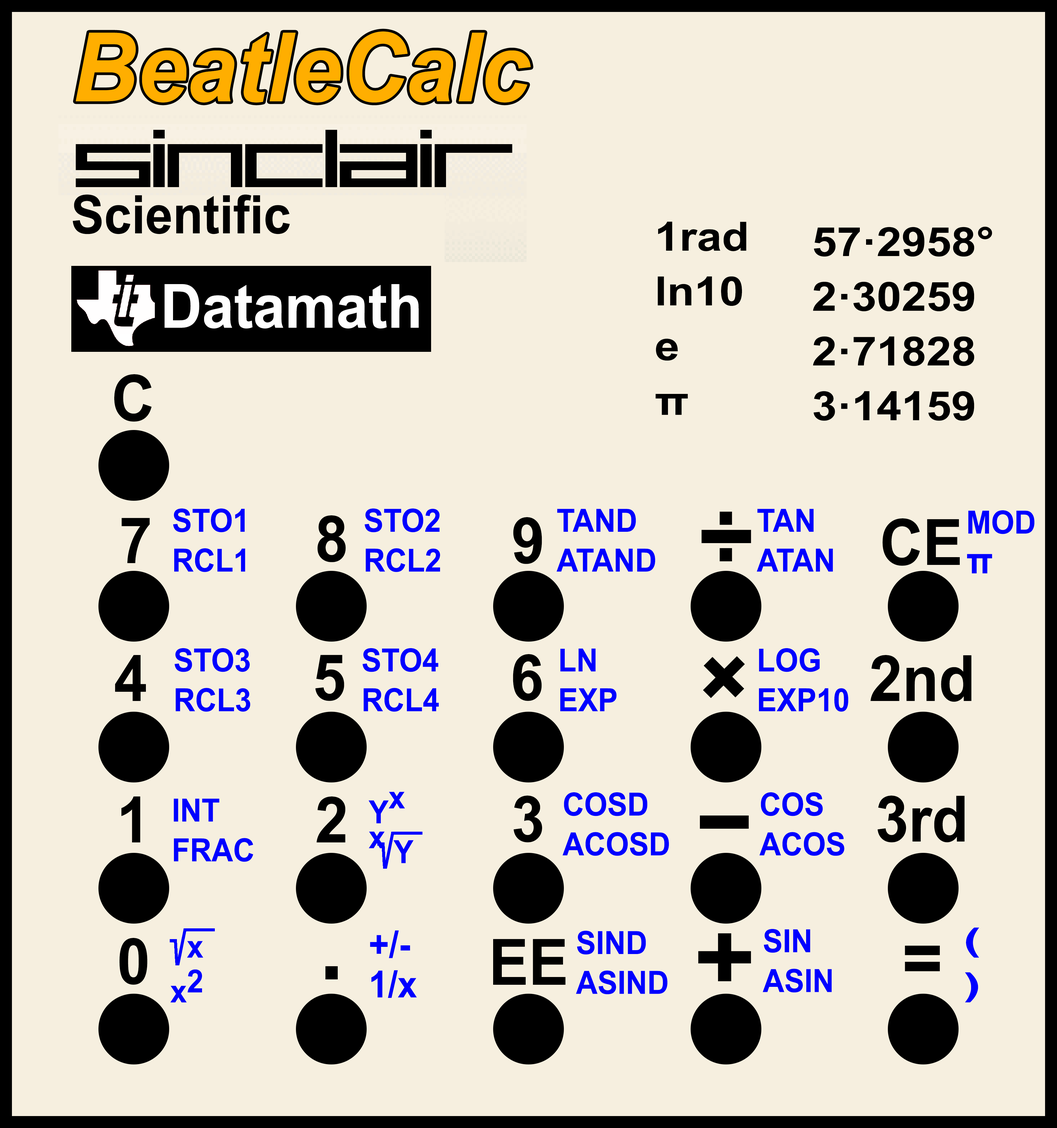
<style>
.page{position:relative;width:1057px;height:1128px;background:#f6efdf}
.page>*{position:absolute;margin:0}
.t1{font:95.8px "Arial-BoldItalicMT";color:#ffae00;scale:0.93 1}
.t2{font:53.2px "Arial-BoldMT";color:#000000;scale:0.93 1}
.t3{font:40.3px/54.7px "Arial-BoldMT";color:#010101;scale:1.11 1}
.t4{font:40.3px/54.7px "Arial-BoldMT";color:#000000;scale:1.11 1}
.t5{font:60.9px "Arial-BoldMT";color:#fefefe;scale:0.94 1}
.t6{font:63.9px "Arial-BoldMT";color:#000000;scale:0.93 1}
.t7{font:31.9px/39.8px "Arial-BoldMT";color:#0000ff;scale:0.93 1}
.t8{font:95.8px "Arial-BoldMT";color:#000000;scale:0.93 1}
.t9{font:37.2px/39.8px "Arial-BoldMT";color:#0000ff;scale:0.93 1}
.t10{font:95.8px "Arial-BoldMT";color:#000000;scale:1.91 1}
.t11{font:95.7px "Arial-BoldMT";color:#000000;scale:1.89 1}
.t12{font:31.9px/44.8px "Arial-BoldMT";color:#0000ff;scale:1.64 1}
.t13{font:31.9px/44.8px "Arial-BoldMT";color:#0000ff;scale:0.93 1}
.t14{font:95.7px "Arial-BoldMT";color:#000000;scale:1.1 1}
.t15{font:74.5px "Arial-BoldMT";color:#000000;scale:0.93 1}
</style>
<div class="page">
<p class="t1" style="left:75px;top:31px;width:456px;height:72px">BeatleCalc</p>
<p class="t2" style="left:73px;top:195px;width:217px;height:39px">Scientific</p>
<p class="t3" style="left:656px;top:221px;width:91px;height:194px">1rad<br>ln10<br>e<br>π</p>
<p class="t4" style="left:813px;top:226px;width:179px;height:195px">57·2958°<br>2·30259<br>2·71828<br>3·14159</p>
<p class="t5" style="left:164px;top:284px;width:255px;height:45px">Datamath</p>
<p class="t6" style="left:114px;top:374px;width:38px;height:48px">C</p>
<p class="t7" style="left:173px;top:508px;width:72px;height:64px">STO1<br>RCL1</p>
<p class="t7" style="left:365px;top:508px;width:75px;height:64px">STO2<br>RCL2</p>
<p class="t7" style="left:556px;top:509px;width:99px;height:63px">TAND<br>ATAND</p>
<p class="t7" style="left:757px;top:509px;width:76px;height:63px">TAN<br>ATAN</p>
<p class="t6" style="left:121px;top:518px;width:29px;height:45px">7</p>
<p class="t6" style="left:317px;top:515px;width:29px;height:47px">8</p>
<p class="t6" style="left:513px;top:517px;width:29px;height:47px">9</p>
<p class="t8" style="left:720px;top:511px;width:12px;height:50px">:</p>
<p class="t6" style="left:883px;top:518px;width:77px;height:48px">CE</p>
<p class="t7" style="left:967px;top:510px;width:68px;height:64px">MOD<br><span class="t9">π</span></p>
<p class="t10" style="left:702px;top:530px;width:49px;height:13px">-</p>
<p class="t7" style="left:175px;top:648px;width:75px;height:64px">STO3<br>RCL3</p>
<p class="t7" style="left:363px;top:648px;width:76px;height:64px">STO4<br>RCL4</p>
<p class="t7" style="left:560px;top:648px;width:57px;height:63px">LN<br>EXP</p>
<p class="t7" style="left:759px;top:648px;width:90px;height:64px">LOG<br>EXP10</p>
<p class="t6" style="left:115px;top:655px;width:31px;height:46px">4</p>
<p class="t6" style="left:315px;top:655px;width:29px;height:46px">5</p>
<p class="t6" style="left:513px;top:654px;width:29px;height:47px">6</p>
<p class="t8" style="left:703px;top:656px;width:42px;height:42px;rotate:45deg">+</p>
<p class="t6" style="left:871px;top:655px;width:101px;height:47px">2nd</p>
<p class="t6" style="left:121px;top:796px;width:19px;height:46px">1</p>
<p class="t6" style="left:317px;top:796px;width:29px;height:46px">2</p>
<p class="t7" style="left:369px;top:792px;width:45px;height:71px">Yx<br>x Y</p>
<p class="t6" style="left:514px;top:796px;width:28px;height:46px">3</p>
<p class="t7" style="left:562px;top:792px;width:107px;height:64px">COSD<br>ACOSD</p>
<p class="t7" style="left:759px;top:792px;width:85px;height:64px">COS<br>ACOS</p>
<p class="t6" style="left:878px;top:796px;width:87px;height:46px">3rd</p>
<p class="t7" style="left:174px;top:798px;width:79px;height:64px">INT<br>FRAC</p>
<p class="t11" style="left:700px;top:815px;width:49px;height:14px">-</p>
<p class="t7" style="left:763px;top:929px;width:69px;height:63px">SIN<br>ASIN</p>
<p class="t12" style="left:965px;top:927px;width:14px;height:75px">(<br>)</p>
<p class="t6" style="left:119px;top:938px;width:28px;height:47px">0</p>
<p class="t13" style="left:170px;top:941px;width:34px;height:62px">x<br>x2</p>
<p class="t9" style="left:370px;top:930px;width:47px;height:68px">+/-<br>1/x</p>
<p class="t6" style="left:493px;top:939px;width:73px;height:46px">EE</p>
<p class="t7" style="left:576px;top:931px;width:92px;height:63px">SIND<br>ASIND</p>
<p class="t14" style="left:698px;top:933px;width:53px;height:48px">+</p>
<p class="t15" style="left:905px;top:946px;width:35px;height:25px">=</p>
<p class="t8" style="left:325px;top:966px;width:13px;height:13px">.</p>
</div>
